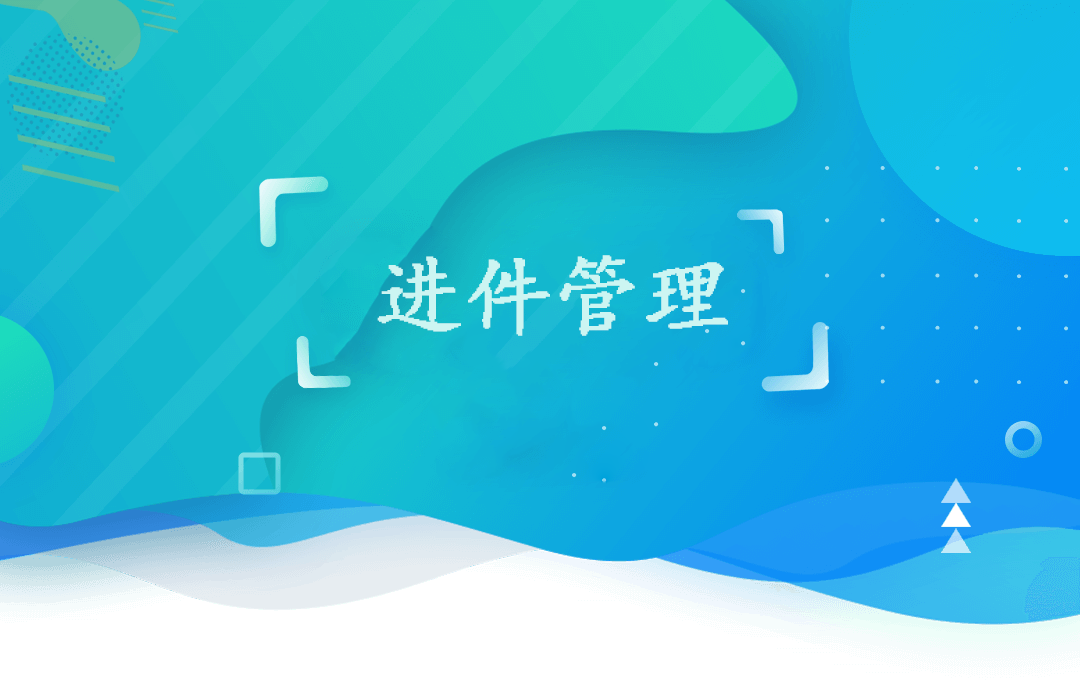
<style>
.page{position:relative;width:1080px;height:700px}
.page>*{position:absolute;margin:0}
.t1{font:88.8px "¿¬Ìå";color:#ccf5f2;text-transform:uppercase;font-weight:bold}
</style>
<div class="page">
<p class="t1" style="left:377px;top:255px;width:351px;height:81px">进件管理</p>
</div>
